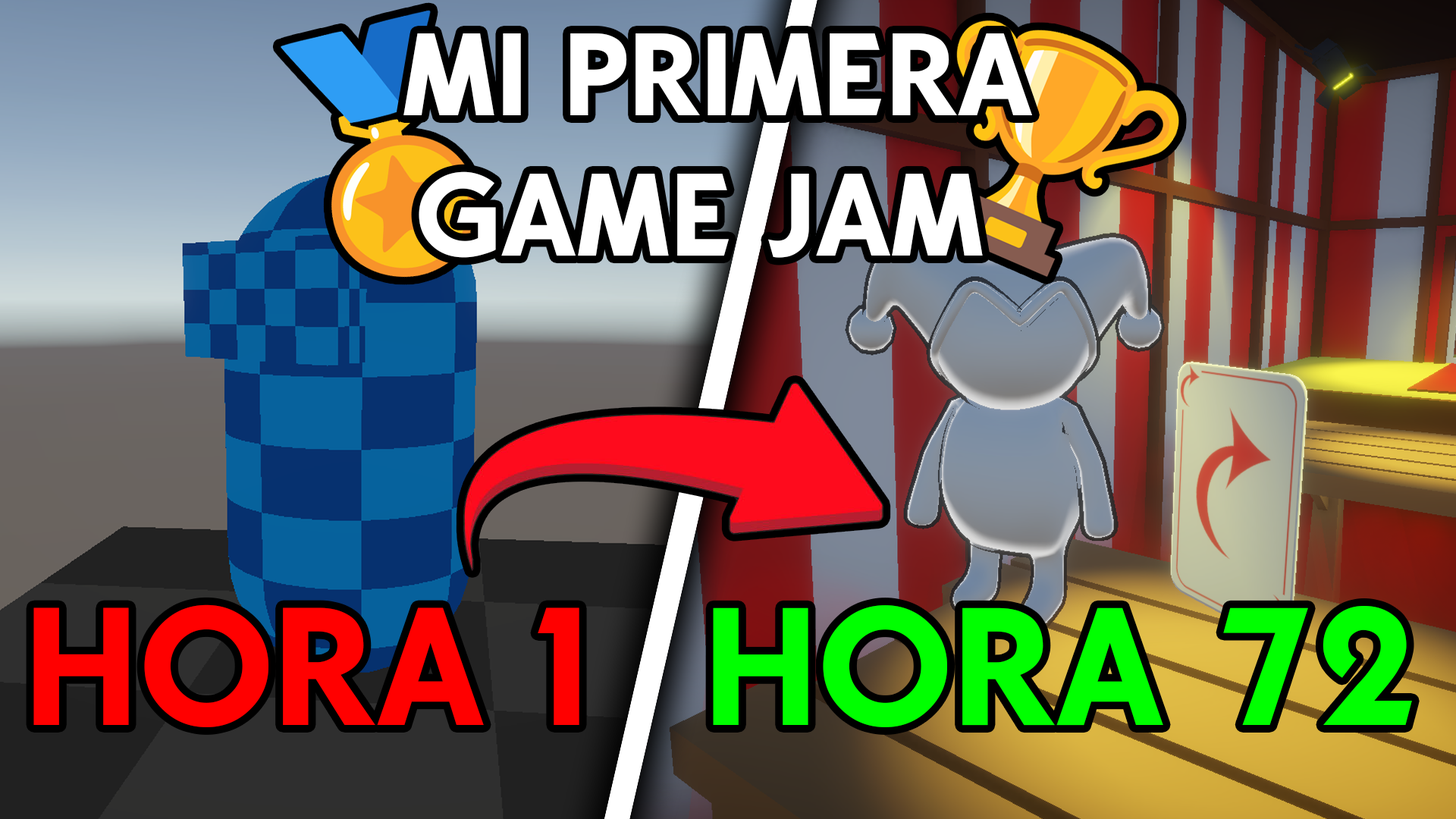
<style>
.page{position:relative;width:1456px;height:819px}
.page>*{position:absolute;margin:0}
.t1{font:116.9px "TheSimsSans-Bold";color:#ffffff}
.t2{font:167.2px "TheSimsSans-Bold";color:#ff0000}
.t3{font:166.9px "TheSimsSans-Bold";color:#00ff00}
</style>
<div class="page">
<p class="t1" style="left:403px;top:33px;width:629px;height:225px;text-align:center">MI PRIMERA<br>GAME JAM</p>
<p class="t2" style="left:33px;top:604px;width:546px;height:123px">HORA 1</p>
<p class="t3" style="left:713px;top:605px;width:699px;height:122px">HORA 72</p>
</div>
